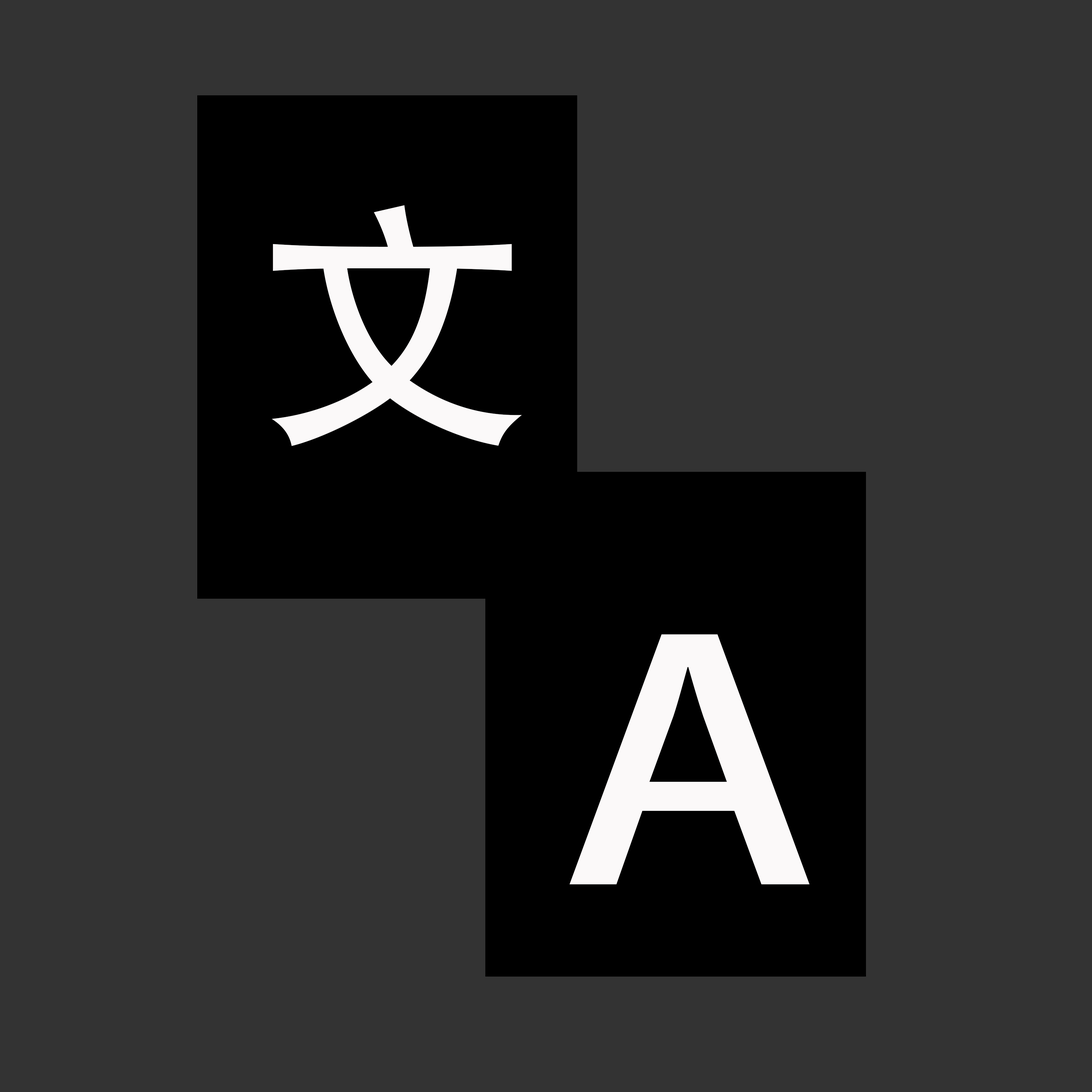
<style>
.page{position:relative;width:1092px;height:1092px;background:#333333}
.page>*{position:absolute;margin:0}
.t1{font:278.9px "AdobeHeitiStd-Regular";color:#fbf9f9}
.t2{font:326.1px "AdobeHeitiStd-Regular";color:#fbf9f9;scale:1.21 1}
</style>
<div class="page">
<p class="t1" style="left:272px;top:205px;width:250px;height:241px">文</p>
<p class="t2" style="left:570px;top:634px;width:239px;height:250px">Ａ</p>
</div>
